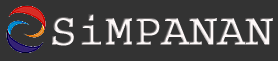
<style>
.page{position:relative;width:278px;height:61px;background:#333333}
.page>*{position:absolute;margin:0}
.t1{font:44.7px "Courier";font-weight:bold}
</style>
<div class="page">
<p class="t1" style="left:52px;top:14px;width:221px;height:32px">SiMPANAN</p>
</div>
